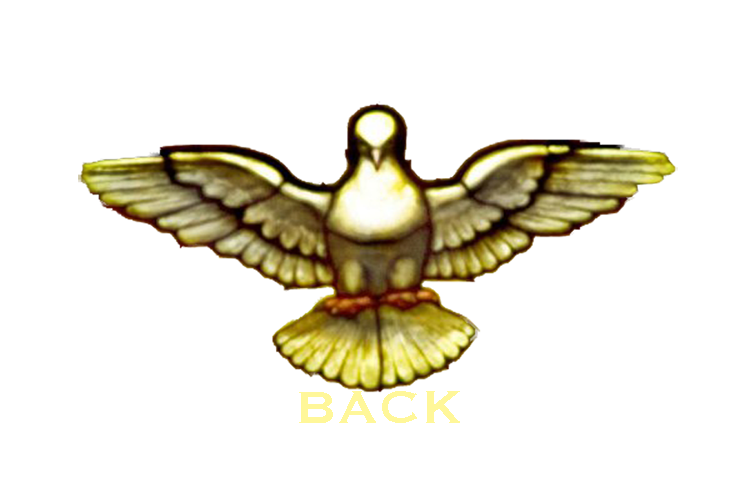
<style>
.page{position:relative;width:750px;height:489px;background:#ffffff}
.page>*{position:absolute;margin:0}
.t1{font:59.8px "Copperplate";color:#fff799}
</style>
<div class="page">
<p class="t1" style="left:299px;top:391px;width:161px;height:32px">BACK</p>
</div>
